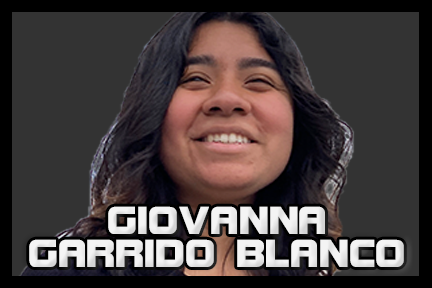
<style>
.page{position:relative;width:432px;height:288px;background:#333333}
.page>*{position:absolute;margin:0}
.t1{font:41.7px/33.3px "BolsterBold";color:#f3f3f3}
</style>
<div class="page">
<p class="t1" style="left:29px;top:206px;width:375px;height:61px;text-align:center">GIOVANNA<br>GARRIDO BLANCO</p>
</div>
